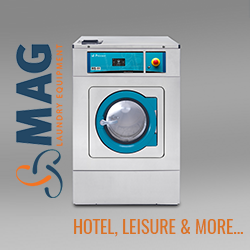
<style>
.page{position:relative;width:250px;height:250px}
.page>*{position:absolute;margin:0}
.t1{font:17.9px "Oswald-Regular";color:#da7324;text-transform:uppercase}
</style>
<div class="page">
<p class="t1" style="left:74px;top:219px;width:169px;height:18px">HOTEL, Leisure &amp; More...</p>
</div>
